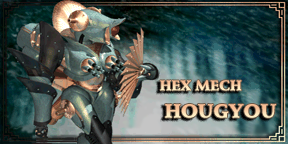
<style>
.page{position:relative;width:288px;height:144px}
.page>*{position:absolute;margin:0}
.t1{font:13.9px "StempelSchneidlerStd-Black"}
.t2{font:18.8px "StempelSchneidlerStd-Black"}
</style>
<div class="page">
<p class="t1" style="left:160px;top:80px;width:82px;height:11px">HEX MECH</p>
<p class="t2" style="left:165px;top:104px;width:111px;height:14px">HOUGYOU</p>
</div>
